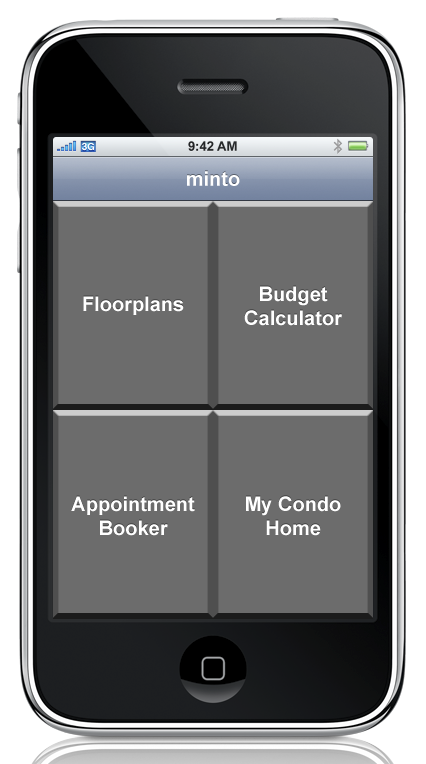
<style>
.page{position:relative;width:426px;height:764px;background:#6c6c6c}
.page>*{position:absolute;margin:0}
.t1{font:20px "Arial-BoldMT";color:#ffffff}
</style>
<div class="page">
<p class="t1" style="left:187px;top:171px;width:53px;height:15px">minto</p>
<p class="t1" style="left:244px;top:286px;width:98px;height:40px;text-align:center">Budget<br>Calculator</p>
<p class="t1" style="left:83px;top:296px;width:101px;height:19px">Floorplans</p>
<p class="t1" style="left:71px;top:496px;width:124px;height:40px;text-align:center">Appointment<br>Booker</p>
<p class="t1" style="left:246px;top:496px;width:95px;height:40px;text-align:center">My Condo<br>Home</p>
</div>
